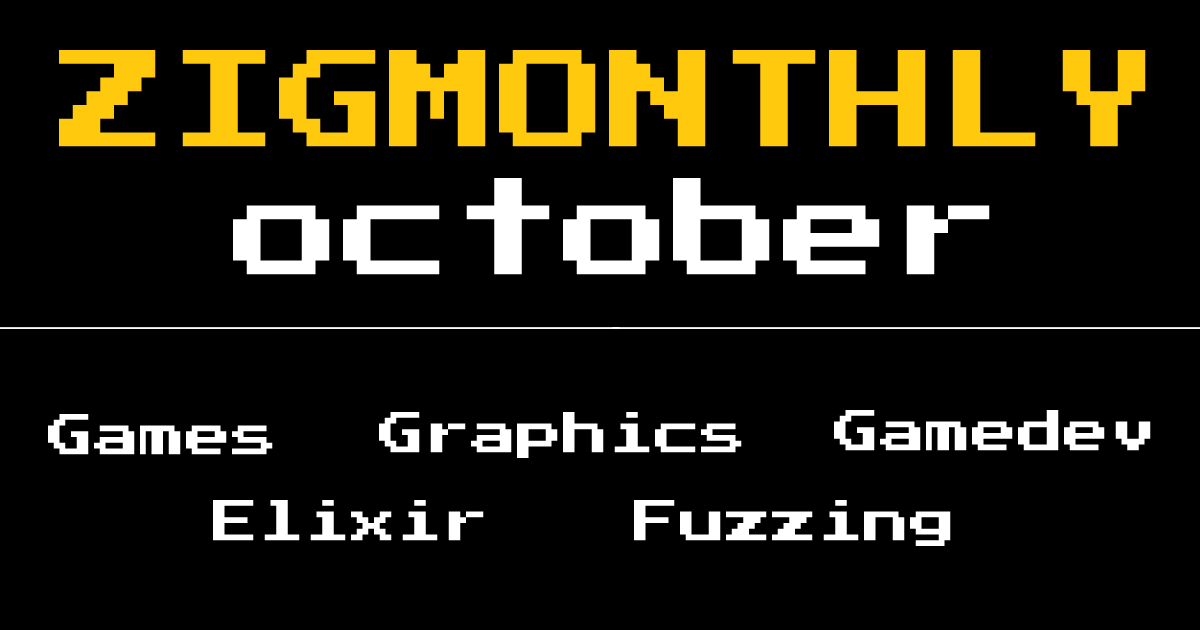
<style>
.page{position:relative;width:1200px;height:630px;background:#000000}
.page>*{position:absolute;margin:0}
.t1{font:110px "PressStart2P-Regular";color:#ffc90e}
.t2{font:110px "PressStart2P-Regular";color:#ffffff}
.t3{font:46px "PressStart2P-Regular";color:#ffffff}
</style>
<div class="page">
<p class="t1" style="left:59px;top:50px;width:1087px;height:97px">ZIGMONTHLY</p>
<p class="t2" style="left:233px;top:178px;width:757px;height:97px">october</p>
<p class="t3" style="left:48px;top:414px;width:225px;height:41px">Games</p>
<p class="t3" style="left:379px;top:412px;width:363px;height:46px">Graphics</p>
<p class="t3" style="left:834px;top:410px;width:317px;height:41px">Gamedev</p>
<p class="t3" style="left:213px;top:500px;width:271px;height:41px">Elixir</p>
<p class="t3" style="left:634px;top:500px;width:317px;height:46px">Fuzzing</p>
</div>
